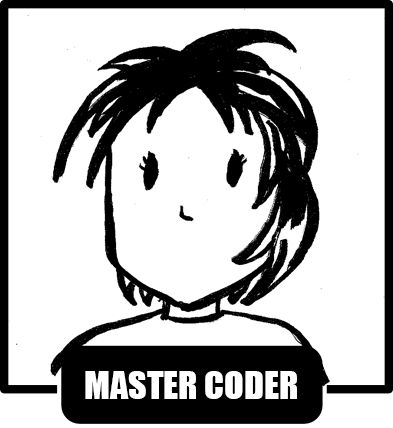
<style>
.page{position:relative;width:393px;height:428px;background:#ffffff}
.page>*{position:absolute;margin:0}
.t1{font:36px "Impact";color:#ffffff}
</style>
<div class="page">
<p class="t1" style="left:85px;top:371px;width:212px;height:28px">MASTER CODER</p>
</div>
